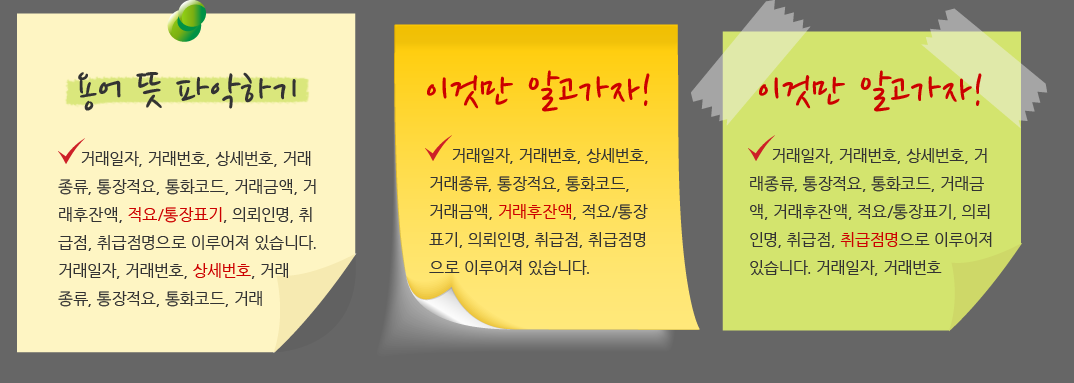
<style>
.page{position:relative;width:1074px;height:383px;background:#666666}
.page>*{position:absolute;margin:0}
.t1{font:48px "NanumPenOTF";color:#333333}
.t2{font:48px "NanumPenOTF";color:#cc0000}
.t3{font:16px "NanumGothic";color:#333333}
.t4{font:16px "NanumGothic";color:#cc0000}
</style>
<div class="page">
<p class="t1" style="left:78px;top:72px;width:218px;height:39px">용어 뜻 파악하기</p>
<p class="t2" style="left:427px;top:70px;width:223px;height:42px">이것만 알고가자!</p>
<p class="t2" style="left:759px;top:70px;width:223px;height:42px">이것만 알고가자!</p>
<p class="t3" style="left:429px;top:148px;width:219px;height:127px">거래일자, 거래번호, 상세번호,<br>거래종류, 통장적요, 통화코드,<br>거래금액, <span class="t4">거래후잔액</span>, 적요/통장<br>표기, 의뢰인명, 취급점, 취급점명<br>으로 이루어져 있습니다.</p>
<p class="t3" style="left:750px;top:148px;width:242px;height:128px">거래일자, 거래번호, 상세번호, 거<br>래종류, 통장적요, 통화코드, 거래금<br>액, 거래후잔액, 적요/통장표기, 의뢰<br>인명, 취급점, <span class="t4">취급점명</span>으로 이루어져<br>있습니다. 거래일자, 거래번호</p>
<p class="t3" style="left:58px;top:151px;width:258px;height:156px">거래일자, 거래번호, 상세번호, 거래<br>종류, 통장적요, 통화코드, 거래금액, 거<br>래후잔액, <span class="t4">적요/통장표기</span>, 의뢰인명, 취<br>급점, 취급점명으로 이루어져 있습니다.<br>거래일자, 거래번호, <span class="t4">상세번호</span>, 거래<br>종류, 통장적요, 통화코드, 거래</p>
</div>
